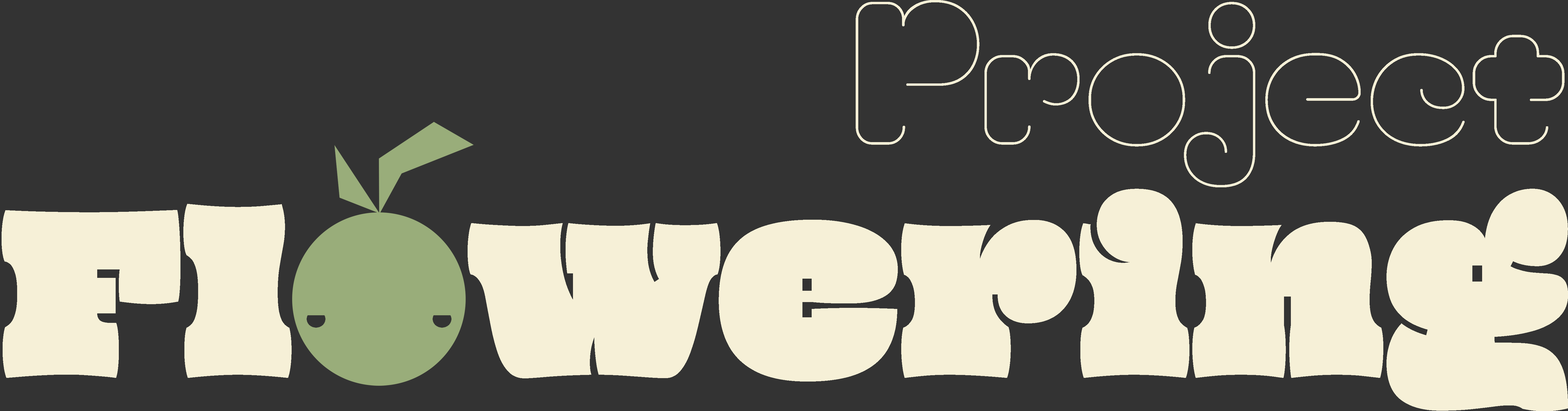
<style>
.page{position:relative;width:1568px;height:411px;background:#333333}
.page>*{position:absolute;margin:0}
.t1{font:183.4px "MoiraiOne-Regular";color:#f6f0d7}
.t2{font:211.8px "Oi-Regular";color:#f6f0d7;scale:0.9 1}
</style>
<div class="page">
<p class="t1" style="left:856px;top:0px;width:709px;height:188px">Project</p>
<p class="t2" style="left:2px;top:189px;width:1566px;height:223px">Flowering</p>
</div>
